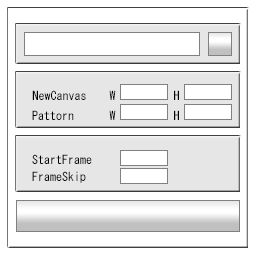
<style>
.page{position:relative;width:256px;height:256px;background:#ffffff}
.page>*{position:absolute;margin:0}
.t1{font:12px "MS-Gothic";color:#000000}
</style>
<div class="page">
<p class="t1" style="left:32px;top:90px;width:54px;height:10px">NewCanvas</p>
<p class="t1" style="left:109px;top:90px;width:7px;height:10px">W</p>
<p class="t1" style="left:174px;top:90px;width:5px;height:10px">H</p>
<p class="t1" style="left:32px;top:110px;width:42px;height:10px">Pattorn</p>
<p class="t1" style="left:109px;top:110px;width:7px;height:10px">W</p>
<p class="t1" style="left:174px;top:110px;width:5px;height:10px">H</p>
<p class="t1" style="left:32px;top:154px;width:60px;height:10px">StartFrame</p>
<p class="t1" style="left:32px;top:171px;width:54px;height:12px">FrameSkip</p>
</div>
